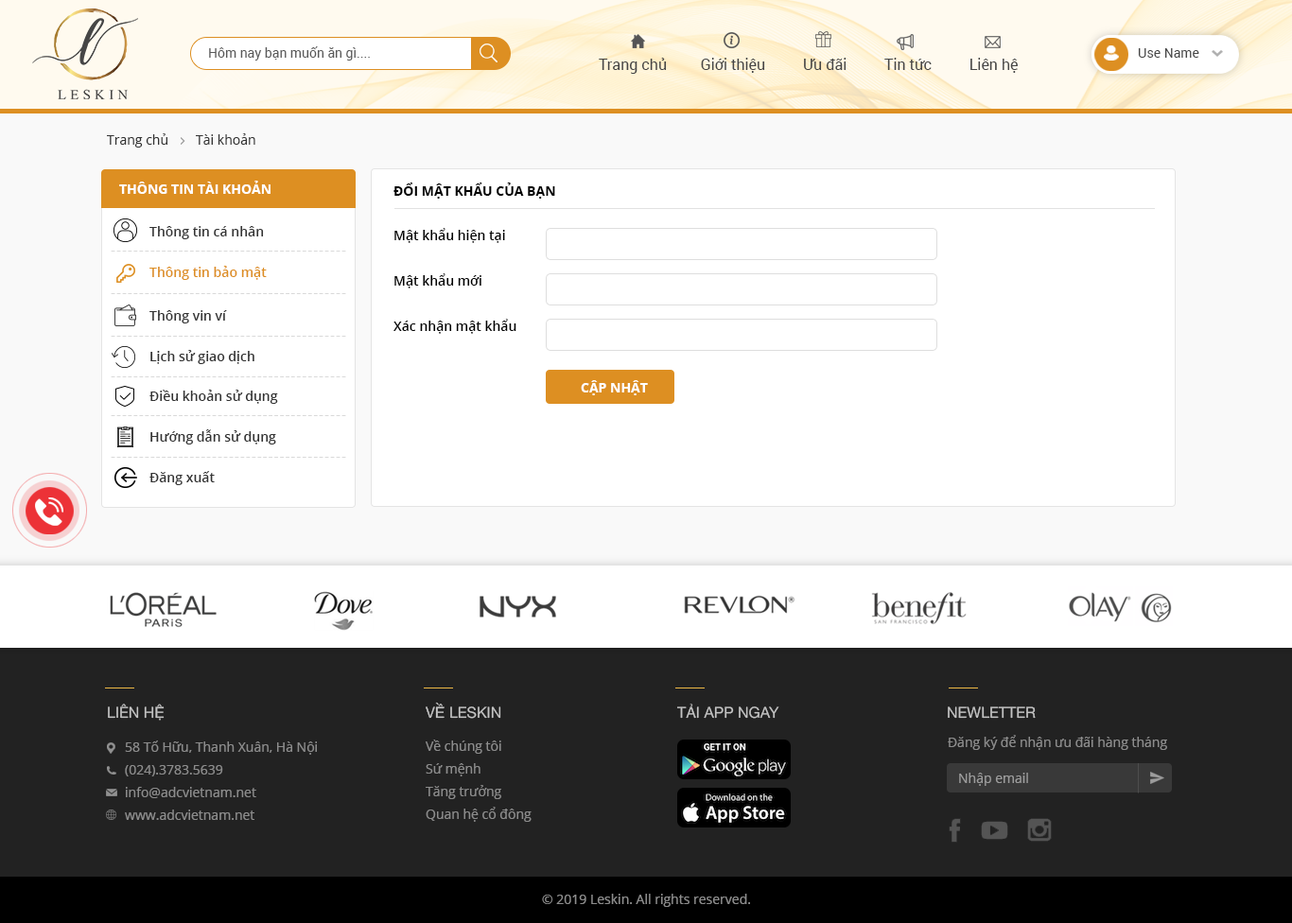
<style>
.page{position:relative;width:1292px;height:923px;background:#ffffff}
.page>*{position:absolute;margin:0}
.t1{font:13.2px "Roboto-Regular";color:#595959}
.t2{font:13.2px "Roboto-Regular";color:#464646}
.t3{font:15.1px "Roboto-Regular";color:#464646}
.t4{font:13.2px "OpenSans";color:#333333}
.t5{font:13.2px "OpenSans-Bold";color:#ffffff;text-transform:uppercase}
.t6{font:13.2px "OpenSans-Bold";color:#000000;text-transform:uppercase}
.t7{font:13.2px "OpenSans-Semibold";color:#333333}
.t8{font:13.2px/45.4px "OpenSans-Semibold";color:#000000}
.t9{font:15.1px "OpenSans-Light";letter-spacing:0.05em;color:#d9d9d9}
.t10{font:13.2px "OpenSans-Semibold";color:#dd8f22}
.t11{font:15.1px "HelveticaNeue";color:#c4c4c4;text-transform:uppercase}
.t12{font:13.2px "OpenSans";color:#8c8c8c}
.t13{font:13.2px/22.7px "OpenSans";color:#8c8c8c}
.t14{font:13.2px "OpenSans";color:#9c9c9c}
</style>
<div class="page">
<p class="t1" style="left:209px;top:46px;width:161px;height:15px">Hôm nay bạn muốn ăn gì....</p>
<p class="t2" style="left:1138px;top:48px;width:61px;height:10px">Use Name</p>
<p class="t3" style="left:599px;top:58px;width:419px;height:16px">Trang chủ         Giới thiệu          Ưu đãi          Tin tức          Liên hệ</p>
<p class="t4" style="left:107px;top:133px;width:148px;height:15px">Trang chủ        Tài khoản</p>
<p class="t5" style="left:119px;top:181px;width:151px;height:13px">Thông tin tài khoản</p>
<p class="t6" style="left:393px;top:183px;width:162px;height:16px">Đổi mật khẩu của bạn</p>
<p class="t7" style="left:149px;top:226px;width:115px;height:13px">Thông tin cá nhân</p>
<p class="t8" style="left:393px;top:228px;width:123px;height:106px">Mật khẩu hiện tại<br>Mật khẩu mới<br>Xác nhận mật khẩu</p>
<p class="t9" style="left:111px;top:251px;width:235px;height:1px">------------------------------------------</p>
<p class="t10" style="left:149px;top:266px;width:118px;height:14px">Thông tin bảo mật</p>
<p class="t9" style="left:111px;top:293px;width:235px;height:1px">------------------------------------------</p>
<p class="t7" style="left:149px;top:310px;width:78px;height:13px">Thông vin ví</p>
<p class="t9" style="left:111px;top:336px;width:235px;height:1px">------------------------------------------</p>
<p class="t7" style="left:150px;top:350px;width:104px;height:14px">Lịch sử giao dịch</p>
<p class="t9" style="left:111px;top:376px;width:235px;height:1px">------------------------------------------</p>
<p class="t7" style="left:149px;top:390px;width:129px;height:14px">Điều khoản sử dụng</p>
<p class="t5" style="left:581px;top:380px;width:67px;height:15px">Cập nhật</p>
<p class="t9" style="left:111px;top:415px;width:235px;height:1px">------------------------------------------</p>
<p class="t7" style="left:150px;top:429px;width:126px;height:15px">Hướng dẫn sử dụng</p>
<p class="t9" style="left:111px;top:457px;width:235px;height:1px">------------------------------------------</p>
<p class="t7" style="left:149px;top:471px;width:66px;height:14px">Đăng xuất</p>
<p class="t11" style="left:426px;top:702px;width:75px;height:17px">về leskin</p>
<p class="t11" style="left:108px;top:704px;width:57px;height:17px">Liên hệ</p>
<p class="t11" style="left:677px;top:704px;width:102px;height:15px">Tải App ngay</p>
<p class="t11" style="left:948px;top:706px;width:88px;height:13px">newletter</p>
<p class="t12" style="left:948px;top:735px;width:219px;height:15px">Đăng ký để nhận ưu đãi hàng tháng</p>
<p class="t13" style="left:125px;top:741px;width:192px;height:79px">58 Tố Hữu, Thanh Xuân, Hà Nội<br>(024).3783.5639<br>info@adcvietnam.net <br>www.adcvietnam.net</p>
<p class="t13" style="left:426px;top:740px;width:105px;height:82px">Về chúng tôi<br>Sứ mệnh<br>Tăng trưởng<br>Quan hệ cổ đông</p>
<p class="t14" style="left:959px;top:773px;width:69px;height:13px">Nhập email</p>
<p class="t12" style="left:542px;top:894px;width:208px;height:13px">© 2019 Leskin. All rights reserved.</p>
</div>
